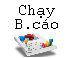
<style>
.page{position:relative;width:71px;height:58px;background:#ffffff}
.page>*{position:absolute;margin:0}
.t1{font:16px/14px "Courier";color:#000000}
.t2{font:16px/14px "CourierNewPSMT";color:#000000}
</style>
<div class="page">
<p class="t1" style="left:15px;top:5px;width:43px;height:24px;text-align:center">Ch<span class="t2">ạ</span>y<br>B.cáo</p>
</div>
